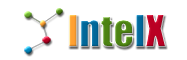
<style>
.page{position:relative;width:187px;height:60px;background:#ffffff}
.page>*{position:absolute;margin:0}
.t1{font:41.5px "Impact";color:#4c8212}
.t2{font:41.5px "Impact";color:#ffa031}
.t3{font:41.5px "Impact";color:#006799}
.t4{font:41.5px "Impact";color:#ba0023}
</style>
<div class="page">
<p class="t1" style="left:68px;top:14px;width:98px;height:34px"><span class="t2">I</span><span class="t3">n</span>te<span class="t3">l</span><span class="t4">X</span></p>
</div>
